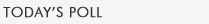
<style>
.page{position:relative;width:209px;height:24px;background:#f5f5f5}
.page>*{position:absolute;margin:0}
.t1{font:14px "FuturaBT-Light";letter-spacing:0.025em;color:#363636;text-transform:uppercase;font-weight:bold}
</style>
<div class="page">
<p class="t1" style="left:3px;top:6px;width:99px;height:12px">today’s poll</p>
</div>
